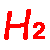
<style>
.page{position:relative;width:50px;height:50px;background:#ffffff}
.page>*{position:absolute;margin:0}
.t1{font:36px "SegoeScript";color:#ff0000;font-weight:bold}
.t2{font:24px "Shruti-Bold";color:#ff0000;font-weight:bold}
</style>
<div class="page">
<p class="t1" style="left:4px;top:9px;width:41px;height:31px">H<span class="t2">2</span></p>
</div>
